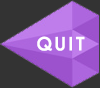
<style>
.page{position:relative;width:100px;height:88px;background:#333333}
.page>*{position:absolute;margin:0}
.t1{font:18px "Landmark-Inline";letter-spacing:0.1em;color:#ffffff;font-weight:bold}
</style>
<div class="page">
<p class="t1" style="left:37px;top:36px;width:48px;height:15px">quit</p>
</div>
